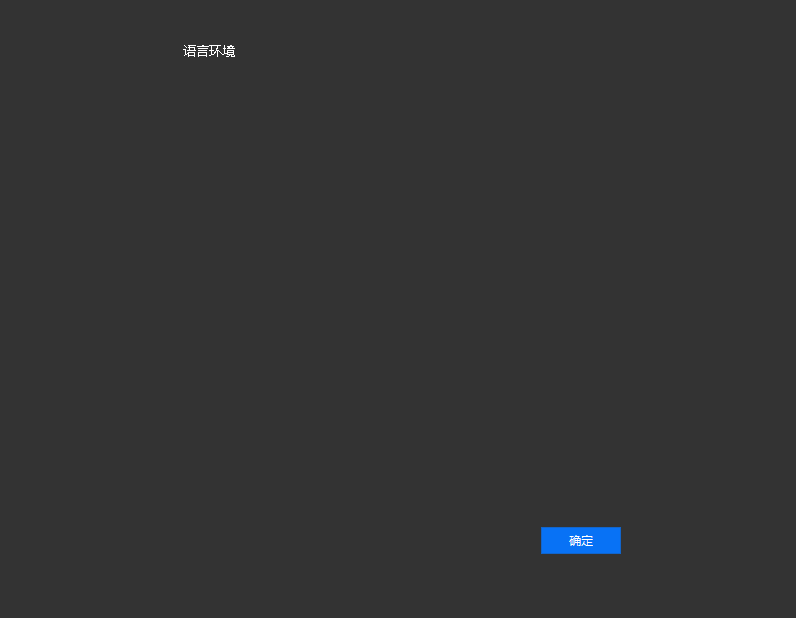
<style>
.page{position:relative;width:796px;height:618px;background:#333333}
.page>*{position:absolute;margin:0}
.t1{font:13.3px "MicrosoftYaHei";color:#ffffff}
</style>
<div class="page">
<p class="t1" style="left:183px;top:45px;width:52px;height:12px">语言环境</p>
</div>
